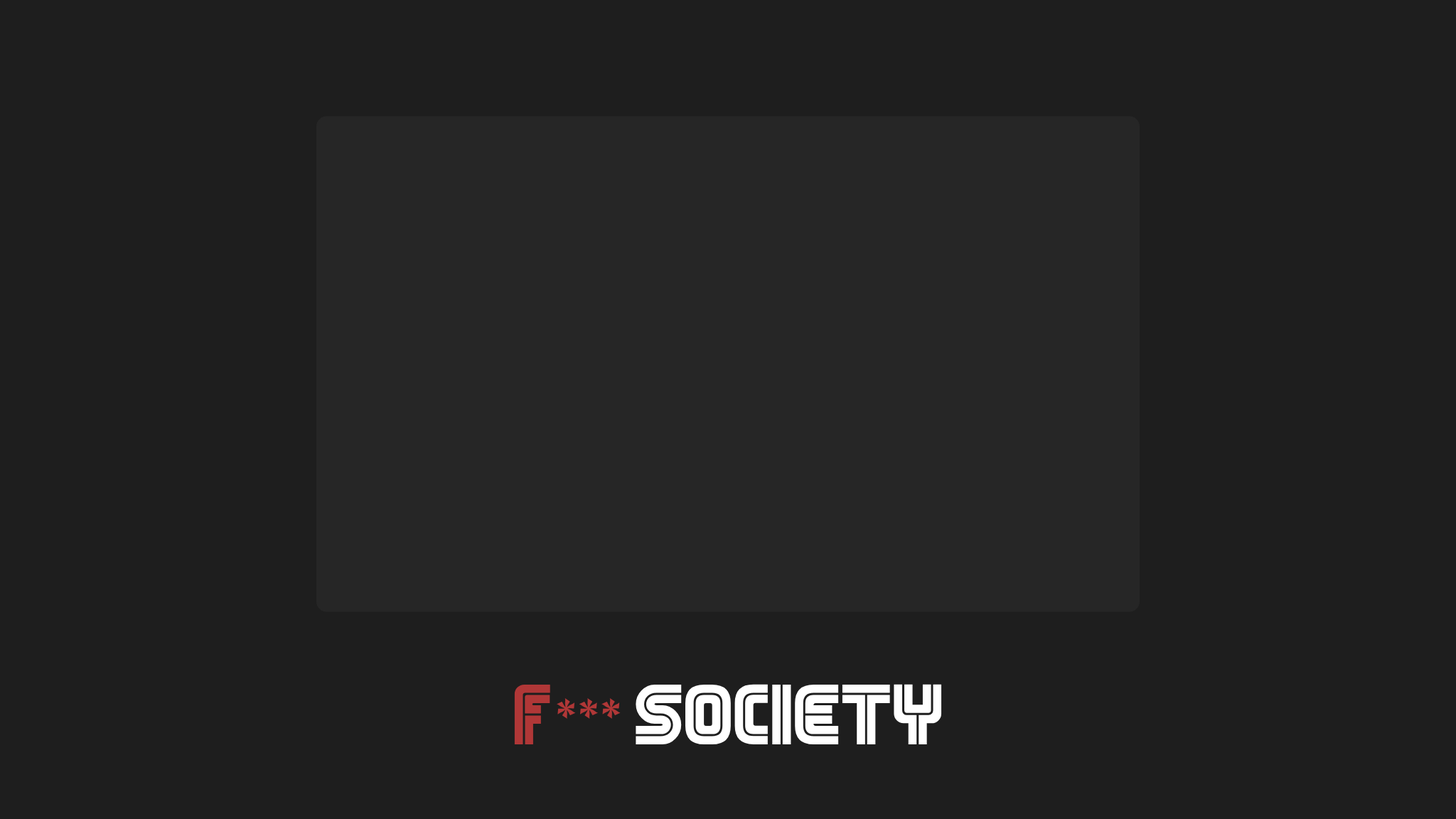
<style>
.page{position:relative;width:1456px;height:819px;background:#1e1e1e}
.page>*{position:absolute;margin:0}
.t1{font:70.4px "MrRobot";color:#ffffff}
.t2{font:70.4px "MrRobot";color:#b03737}
.t3{font:70.4px "itsadzoke";color:#b03737}
</style>
<div class="page">
<p class="t1" style="left:514px;top:684px;width:428px;height:61px"><span class="t2">F</span><span class="t3">*** </span>Society</p>
</div>
